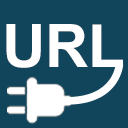
<style>
.page{position:relative;width:128px;height:128px;background:#11455b}
.page>*{position:absolute;margin:0}
.t1{font:60px "Arial-BoldMT";color:#ffffff}
</style>
<div class="page">
<p class="t1" style="left:6px;top:24px;width:117px;height:44px">URL</p>
</div>
